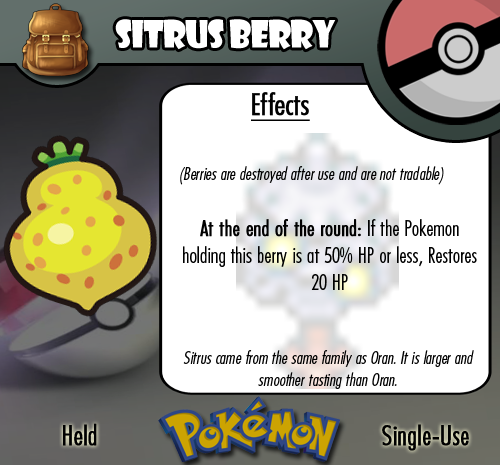
<style>
.page{position:relative;width:500px;height:465px;background:#ffffff}
.page>*{position:absolute;margin:0}
.t1{font:36.7px "ShowcardGothic-Reg";letter-spacing:-0.025em;color:#ffffff;scale:0.91 1}
.t2{font:22.2px "FuturaCondensedBQ-Light";color:#010101}
.t3{font:27.8px "FuturaCondensedBQ-Light";color:#010101;font-weight:bold}
.t4{font:30.6px "FuturaCondensedBQ-Light";color:#010101;font-weight:bold;text-decoration:underline}
.t5{font:18.1px "FuturaCondensedBQ-Light";color:#010101;font-style:italic}
.t6{font:22.2px "FuturaCondensedBQ-Light";color:#010101;font-weight:bold}
</style>
<div class="page">
<p class="t1" style="left:115px;top:19px;width:221px;height:31px">Sitrus Berry</p>
<p class="t2" style="left:180px;top:92px;width:297px;height:198px"><span class="t3">  </span><span class="t4">Effects<br><br><br></span><span class="t5">(Berries are destroyed after use and are not tradable)<br><br><br><br></span><span class="t6">At the end of the round:</span> If the Pokemon holding this berry is at 50% HP or less, Restores 20 HP</p>
<p class="t5" style="left:183px;top:350px;width:291px;height:39px;text-align:center">Sitrus came from the same family as Oran. It is larger and smoother tasting than Oran.</p>
<p class="t3" style="left:63px;top:423px;width:34px;height:23px">Held</p>
<p class="t3" style="left:382px;top:424px;width:87px;height:27px">Single-Use</p>
</div>
